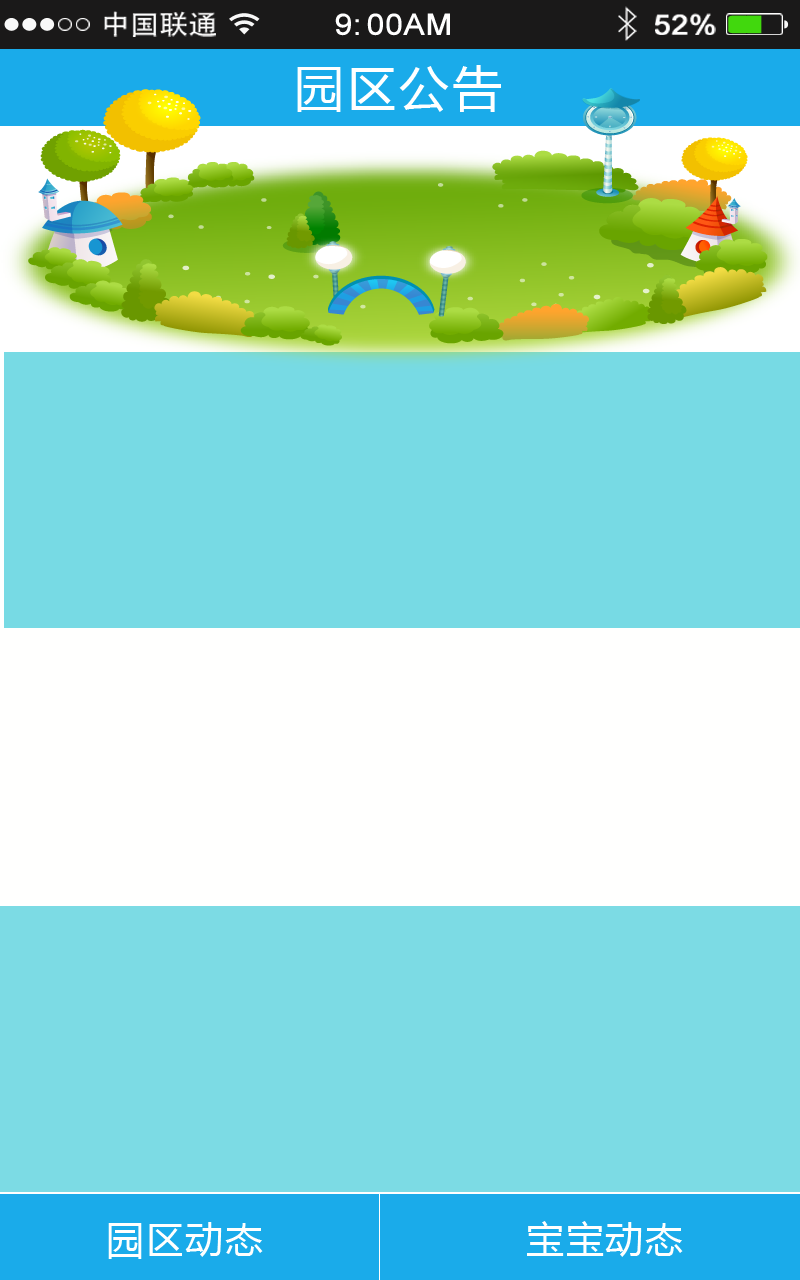
<style>
.page{position:relative;width:800px;height:1280px;background:#7cdbe4}
.page>*{position:absolute;margin:0}
.t1{font:26.8px "AdobeHeitiStd-Regular";color:#ffffff;scale:1.09 1}
.t2{font:29.2px "ArialMT";color:#ffffff;font-weight:bold;scale:1.09 1}
.t3{font:28px "ArialMT";color:#ffffff;font-weight:bold;scale:1.09 1}
.t4{font:50px "MicrosoftYaHei";letter-spacing:0.05em;color:#ffffff}
.t5{font:37.5px "MicrosoftYaHei";letter-spacing:0.05em;color:#fffffe}
</style>
<div class="page">
<p class="t1" style="left:104px;top:11px;width:112px;height:26px">中国联通</p>
<p class="t2" style="left:335px;top:13px;width:115px;height:23px">9:00AM</p>
<p class="t3" style="left:655px;top:13px;width:61px;height:22px">52%</p>
<p class="t4" style="left:297px;top:65px;width:204px;height:47px">园区公告</p>
<p class="t5" style="left:108px;top:1222px;width:155px;height:37px">园区动态</p>
<p class="t5" style="left:527px;top:1221px;width:156px;height:36px">宝宝动态</p>
</div>
